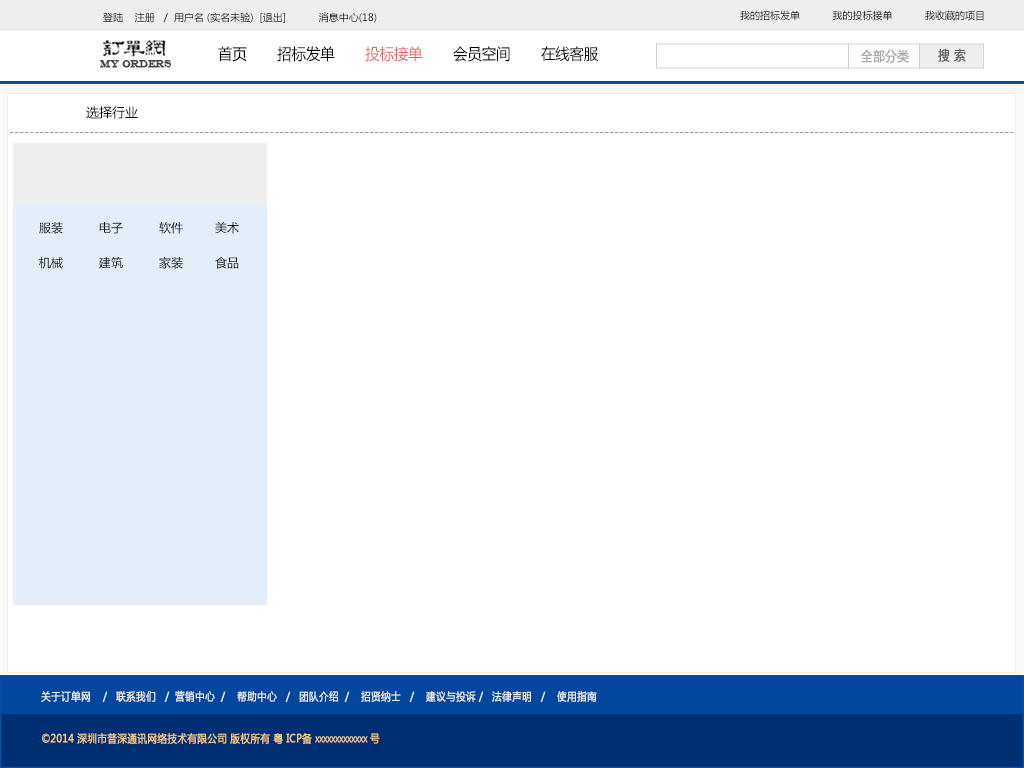
<style>
.page{position:relative;width:1024px;height:768px;background:#ffffff}
.page>*{position:absolute;margin:0}
.t1{font:10px "MicrosoftYaHei";color:#000000}
.t2{font:15.4px "MicrosoftYaHei";color:#000000;font-variant:small-caps;scale:0.94 1}
.t3{font:15.4px "MicrosoftYaHei";color:#ed6059;font-variant:small-caps;scale:0.94 1}
.t4{font:13.2px "MicrosoftYaHei";color:#aaaaaa;font-variant:small-caps;font-weight:bold;scale:0.86 1}
.t5{font:13.2px "MicrosoftYaHei";color:#626262;font-variant:small-caps;font-weight:bold;scale:0.86 1}
.t6{font:9.9px "EngraversMT";color:#434343;font-variant:small-caps;font-weight:bold;scale:0.86 1}
.t7{font:13px "MicrosoftYaHei";color:#000000}
.t8{font:12px "MicrosoftYaHei";color:#a0a0a0}
.t9{font:12px "MicrosoftYaHei";color:#000000}
.t10{font:11px "MicrosoftYaHei";color:#eeeeee;font-variant:small-caps;font-weight:bold;scale:0.86 1}
.t11{font:15.4px "STXihei";color:#eeeeee;font-variant:small-caps;font-weight:bold;scale:0.86 1}
.t12{font:11px "MicrosoftYaHei";color:#facd89;font-variant:small-caps;font-weight:bold;scale:0.87 1}
.t13{font:11px "MicrosoftYaHei";color:#eeeeee;font-variant:small-caps;font-weight:bold;scale:0.87 1}
</style>
<div class="page">
<p class="t1" style="left:103px;top:12px;width:274px;height:11px">登陆    注册   /  用户名 (实名未验)  [退出]           消息中心(18)</p>
<p class="t1" style="left:740px;top:10px;width:244px;height:11px">我的招标发单           我的投标接单           我收藏的项目</p>
<p class="t2" style="left:218px;top:46px;width:381px;height:16px">首页       招标发单       <span class="t3">投标接单</span>       会员空间       在线客服</p>
<p class="t4" style="left:861px;top:49px;width:48px;height:14px">全部分类</p>
<p class="t5" style="left:938px;top:48px;width:28px;height:14px">搜 索</p>
<p class="t6" style="left:100px;top:60px;width:72px;height:8px">MY ORDERS</p>
<p class="t7" style="left:86px;top:106px;width:52px;height:13px">选择行业</p>
<p class="t8" style="left:10px;top:132px;width:1004px;height:1px">---------------------------------------------------------------------------------------------------------------------------------------------------------------------------------------------------------</p>
<p class="t9" style="left:39px;top:221px;width:200px;height:13px">服装         电子         软件        美术</p>
<p class="t9" style="left:39px;top:256px;width:200px;height:13px">机械         建筑         家装        食品</p>
<p class="t10" style="left:41px;top:690px;width:556px;height:12px"><span class="t11"><br><br></span>关于订单网    /   联系我们   /  营销中心  /    帮助中心   /   团队介绍  /    招贤纳士   /    建议与投诉 /   法律声明   /    使用指南</p>
<p class="t12" style="left:42px;top:733px;width:338px;height:11px"><span class="t13"> </span>©2014 深圳市普深通讯网络技术有限公司 版权所有 粤 ICP备 xxxxxxxxxxxxx 号</p>
</div>
